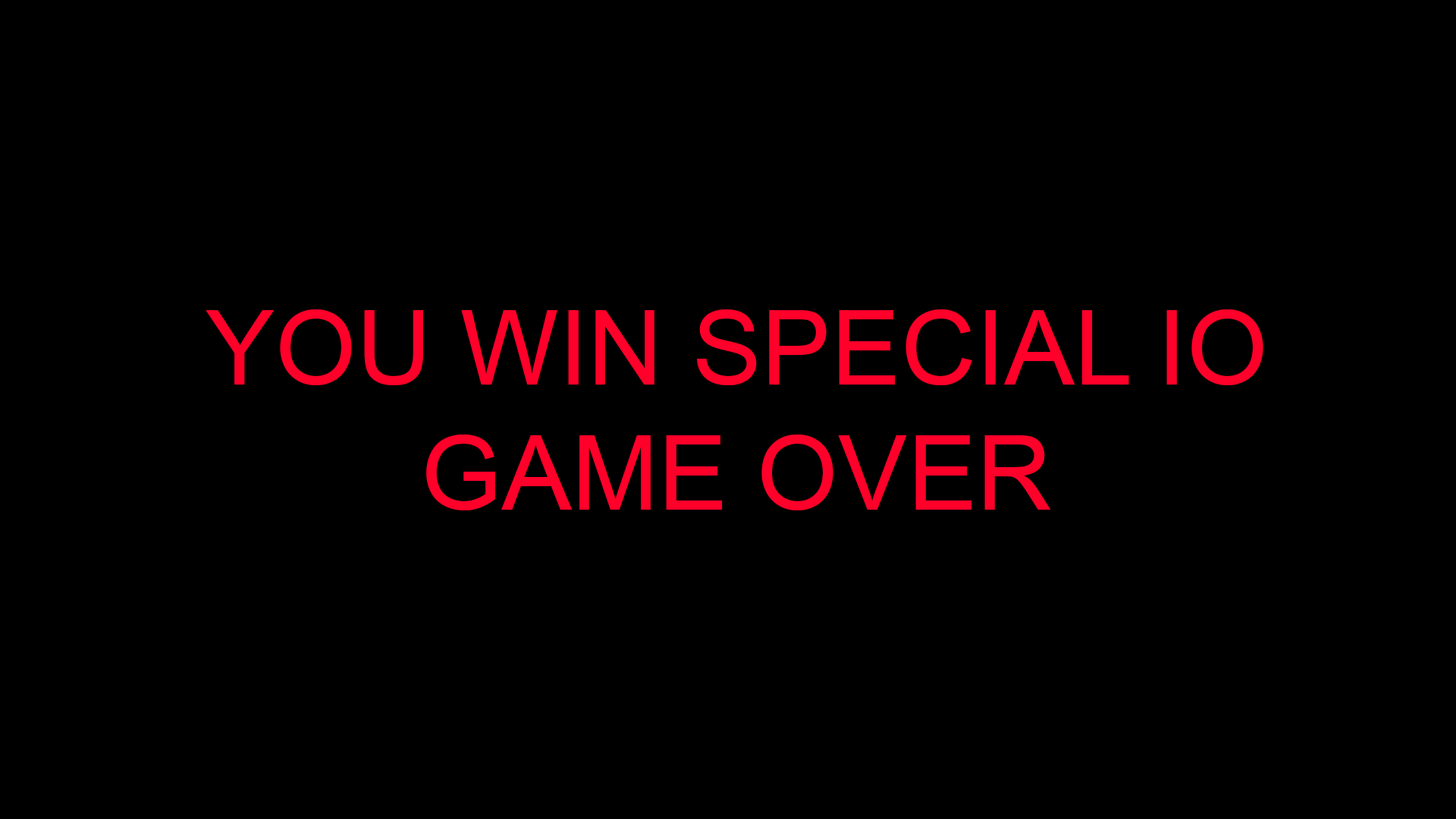
<style>
.page{position:relative;width:1456px;height:819px;background:#000000}
.page>*{position:absolute;margin:0}
.t1{font:104.3px "ArialMT";color:#ff002a}
</style>
<div class="page">
<p class="t1" style="left:206px;top:309px;width:1057px;height:201px;text-align:center">YOU WIN SPECIAL IO <br>GAME OVER</p>
</div>
